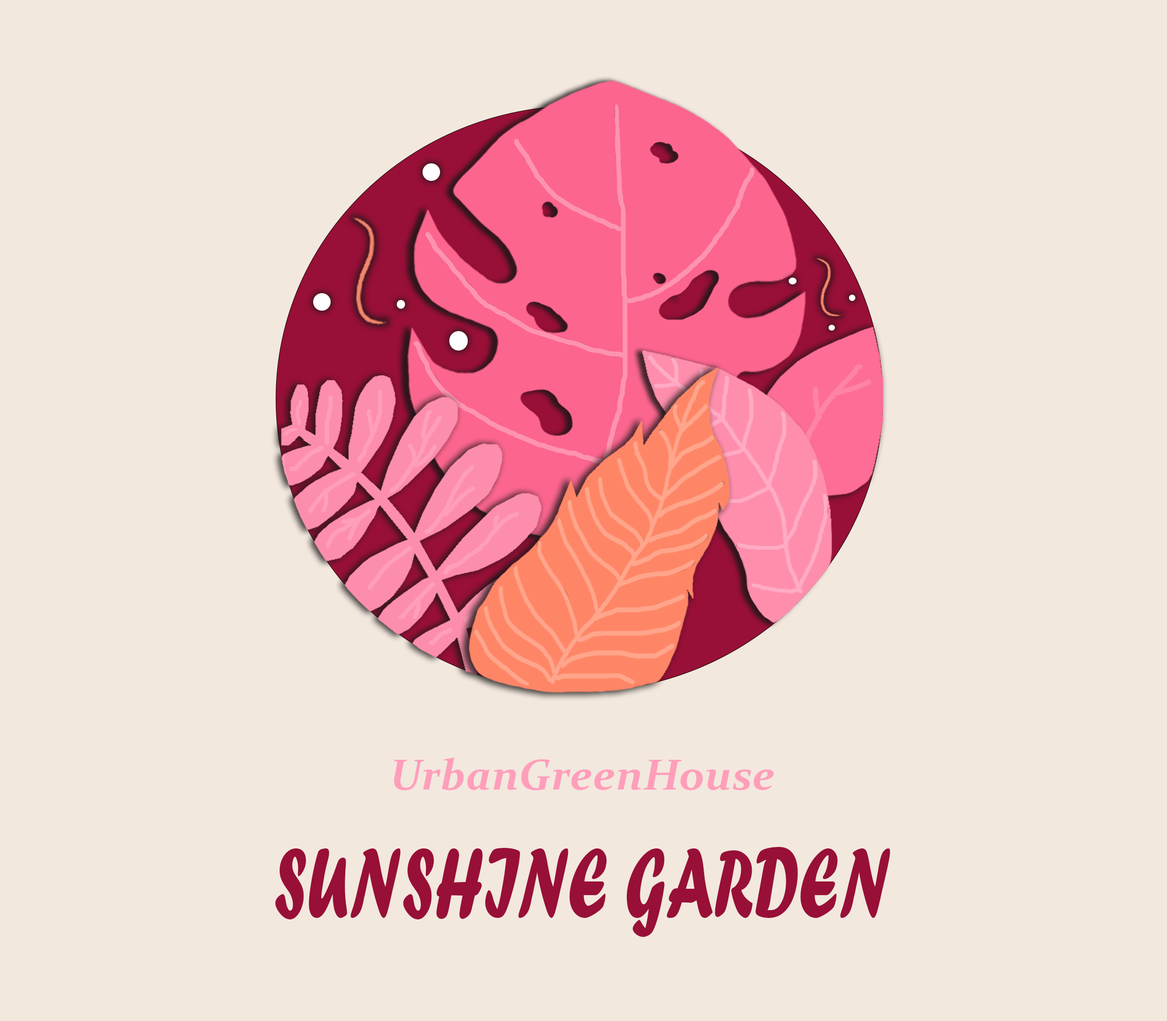
<style>
.page{position:relative;width:1167px;height:1021px;background:#f3e8de}
.page>*{position:absolute;margin:0}
.t1{font:43.6px "Constantia-BoldItalic";letter-spacing:0.005em;color:#ff9eba}
.t2{font:103.3px "ForteMT";letter-spacing:0.005em;color:#980f37;scale:0.63 1}
</style>
<div class="page">
<p class="t1" style="left:394px;top:758px;width:380px;height:33px">UrbanGreenHouse</p>
<p class="t2" style="left:275px;top:847px;width:616px;height:90px">SUNSHINE GARDEN</p>
</div>
